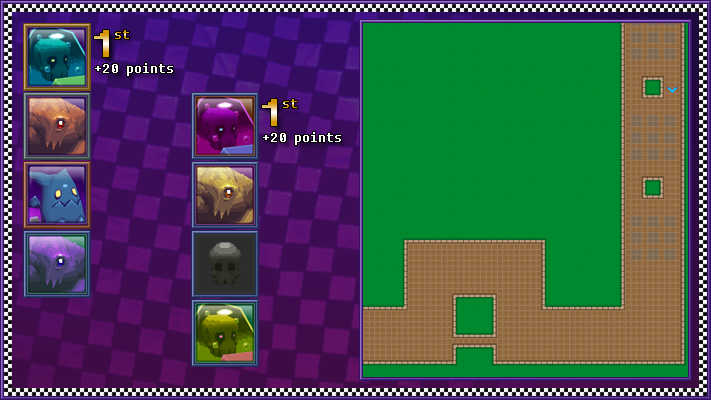
<style>
.page{position:relative;width:711px;height:400px}
.page>*{position:absolute;margin:0}
.t1{font:36px "Fixedsys"}
.t2{font:14px "Fixedsys"}
.t3{font:20px "Fixedsys";color:#fafafa}
</style>
<div class="page">
<p class="t1" style="left:94px;top:30px;width:15px;height:27px">1</p>
<p class="t2" style="left:115px;top:30px;width:14px;height:9px">st</p>
<p class="t3" style="left:95px;top:63px;width:78px;height:13px">+20 points</p>
<p class="t1" style="left:262px;top:99px;width:15px;height:27px">1</p>
<p class="t2" style="left:283px;top:99px;width:14px;height:9px">st</p>
<p class="t3" style="left:263px;top:132px;width:78px;height:13px">+20 points</p>
</div>
